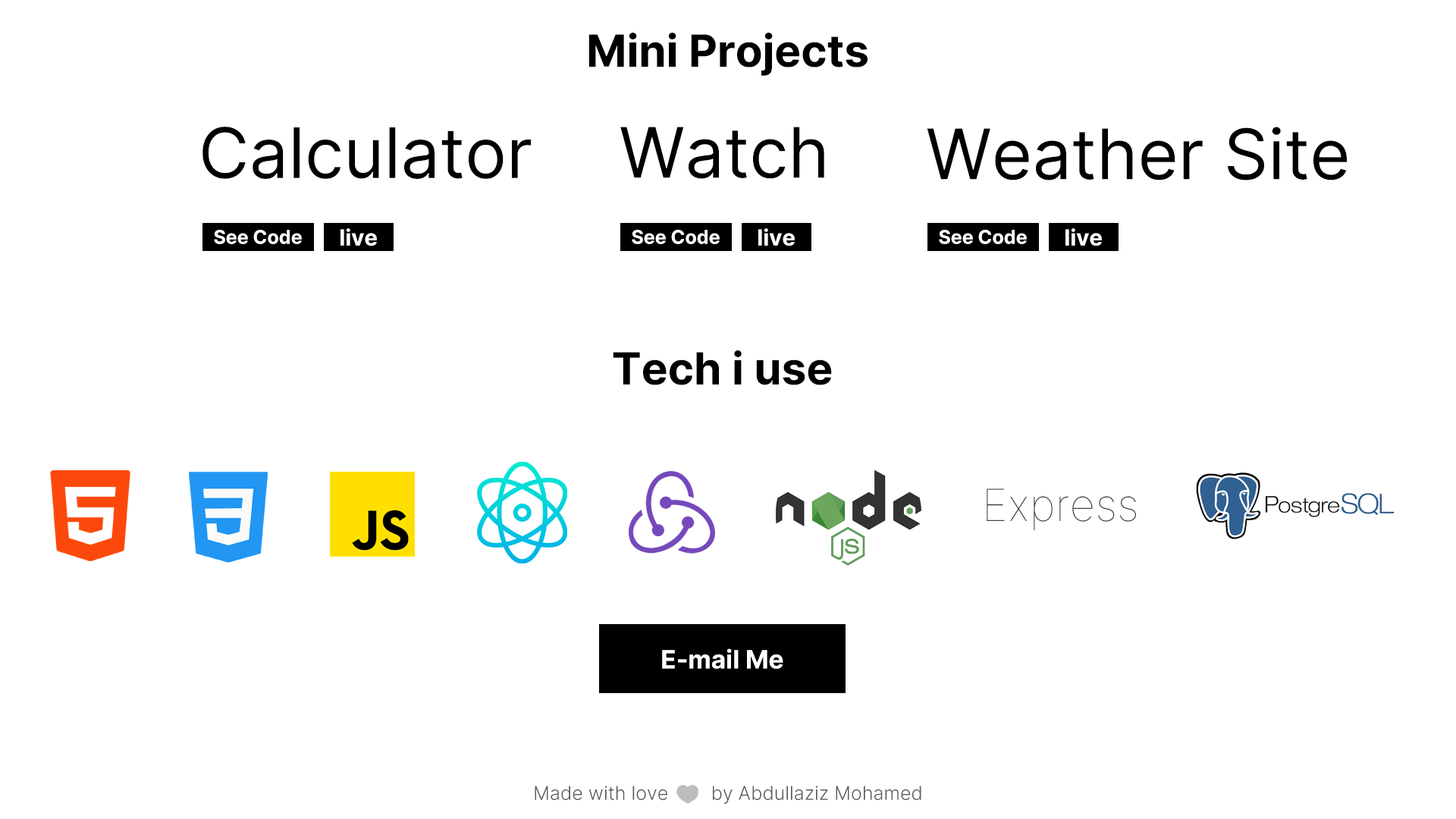
<style>
.page{position:relative;width:1456px;height:819px;background:#ffffff}
.page>*{position:absolute;margin:0}
.t1{font:44.3px "Inter-Bold";color:#000000}
.t2{font:69.5px "Inter-Regular";color:#000000}
.t3{font:44.3px "Inter-Thin";color:#3e3e3e}
.t4{font:19px "Inter-Light";color:#585858}
</style>
<div class="page">
<p class="t1" style="left:588px;top:33px;width:280px;height:43px">Mini Projects</p>
<p class="t2" style="left:202px;top:127px;width:329px;height:52px">Calculator</p>
<p class="t2" style="left:620px;top:127px;width:204px;height:52px">Watch</p>
<p class="t2" style="left:927px;top:127px;width:420px;height:53px">Weather Site</p>
<p class="t1" style="left:613px;top:350px;width:219px;height:35px">Tech i use</p>
<p class="t3" style="left:987px;top:488px;width:149px;height:42px">Express</p>
<p class="t4" style="left:535px;top:786px;width:386px;height:18px">Made with love        by Abdullaziz Mohamed</p>
</div>
